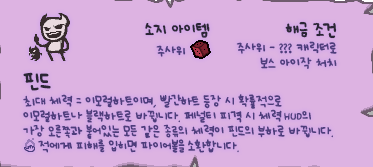
<style>
.page{position:relative;width:373px;height:167px;background:#ddb3e2}
.page>*{position:absolute;margin:0}
.t1{font:12px "UhBeeSe_hyunBold";color:#2b2636}
.t2{font:12px "UhBeeSe_hyunBold";letter-spacing:-0.1em;color:#2b2636}
.t3{font:12px "UhBeeSe_hyunBold";letter-spacing:-0.15em;color:#2b2636}
.t4{font:10px/14.5px "UhBeeSe_hyunBold";color:#4e3d7c}
.t5{font:10px "UhBeeSe_hyunBold";color:#4e3d7c}
.t6{font:10px/15px "UhBeeSe_hyunBold";letter-spacing:-0.025em;color:#4e3d7c}
.t7{font:16px/23px "UhBeeSe_hyunBold";color:#2b2636}
.t8{font:10px/15px "UhBeeSe_hyunBold";letter-spacing:-0.2em;color:#4e3d7c}
.t9{font:10px/15px "UhBeeSe_hyunBold";letter-spacing:-0.15em;color:#4e3d7c}
.t10{font:10px/15px "Font_soulsV2_Title-Regular";letter-spacing:-0.025em;color:#4e3d7c}
.t11{font:10px/15px "UhBeeSe_hyunBold";color:#4e3d7c}
.t12{font:10px/15px "UhBeeSe_hyunBold";letter-spacing:-0.125em;color:#4e3d7c}
</style>
<div class="page">
<p class="t1" style="left:145px;top:23px;width:65px;height:15px"><span class="t2">소</span>지 아이템</p>
<p class="t1" style="left:285px;top:21px;width:52px;height:18px">해금 <span class="t3">조</span>건</p>
<p class="t4" style="left:236px;top:41px;width:101px;height:28px;text-align:right">주사위 - ??? 캐릭터로<br>보스 아이작 처치</p>
<p class="t5" style="left:156px;top:45px;width:30px;height:12px">주사위</p>
<p class="t6" style="left:23px;top:72px;width:310px;height:81px"><span class="t7">핀드<br></span>최대 체력 = 이모럴하트이며, <span class="t8">빨</span><span class="t9">간하</span>트 등장 시 확률적으로<br>이모럴하트나 블랙하트로 바뀝니다. 페널티 피격 시 체력<span class="t10"> HUD</span>의 <span class="t9">가</span>장 오른쪽과 붙어있는 모든 같은 종류의 체력이 핀드의 부하로 바뀝니다.<br>    적에게 피해를 입히면 파<span class="t11">이어볼을</span><span class="t12"> 소환</span>합니다.</p>
</div>
